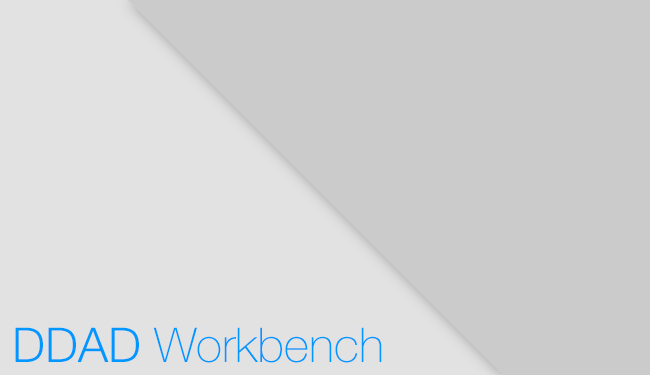
<style>
.page{position:relative;width:650px;height:375px;background:#cbcbcb}
.page>*{position:absolute;margin:0}
.t1{font:48px "HelveticaNeueLTStd-Th";color:#0097ff}
.t2{font:48px "HelveticaNeueLTStd-Lt";color:#0097ff}
</style>
<div class="page">
<p class="t1" style="left:15px;top:327px;width:367px;height:36px"><span class="t2">DDAD</span> Workbench</p>
</div>
